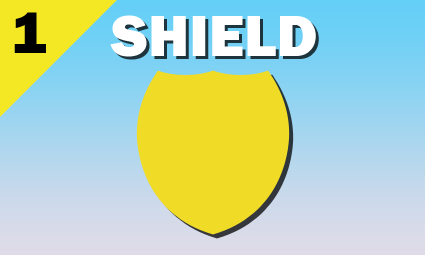
<style>
.page{position:relative;width:425px;height:255px}
.page>*{position:absolute;margin:0}
.t1{font:60px "FranklinGothic-Heavy";color:#000000}
.t2{font:60px "FranklinGothic-Heavy";color:#ffffff}
</style>
<div class="page">
<p class="t1" style="left:14px;top:12px;width:32px;height:41px">1</p>
<p class="t2" style="left:110px;top:15px;width:206px;height:42px">SHIELD</p>
</div>
